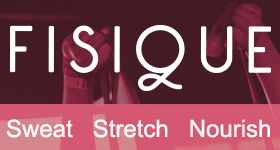
<style>
.page{position:relative;width:280px;height:150px}
.page>*{position:absolute;margin:0}
.t1{font:24px "ArialMT";color:#ffffff}
</style>
<div class="page">
<p class="t1" style="left:7px;top:119px;width:263px;height:19px">Sweat   Stretch   Nourish</p>
</div>
